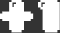
<style>
.page{position:relative;width:60px;height:33px;background:#ffffff}
.page>*{position:absolute;margin:0}
.t1{font:38.8px "04b30";letter-spacing:-0.005em;color:#ffffff;font-weight:bold}
</style>
<div class="page">
<p class="t1" style="left:0px;top:0px;width:60px;height:33px">+1</p>
</div>
